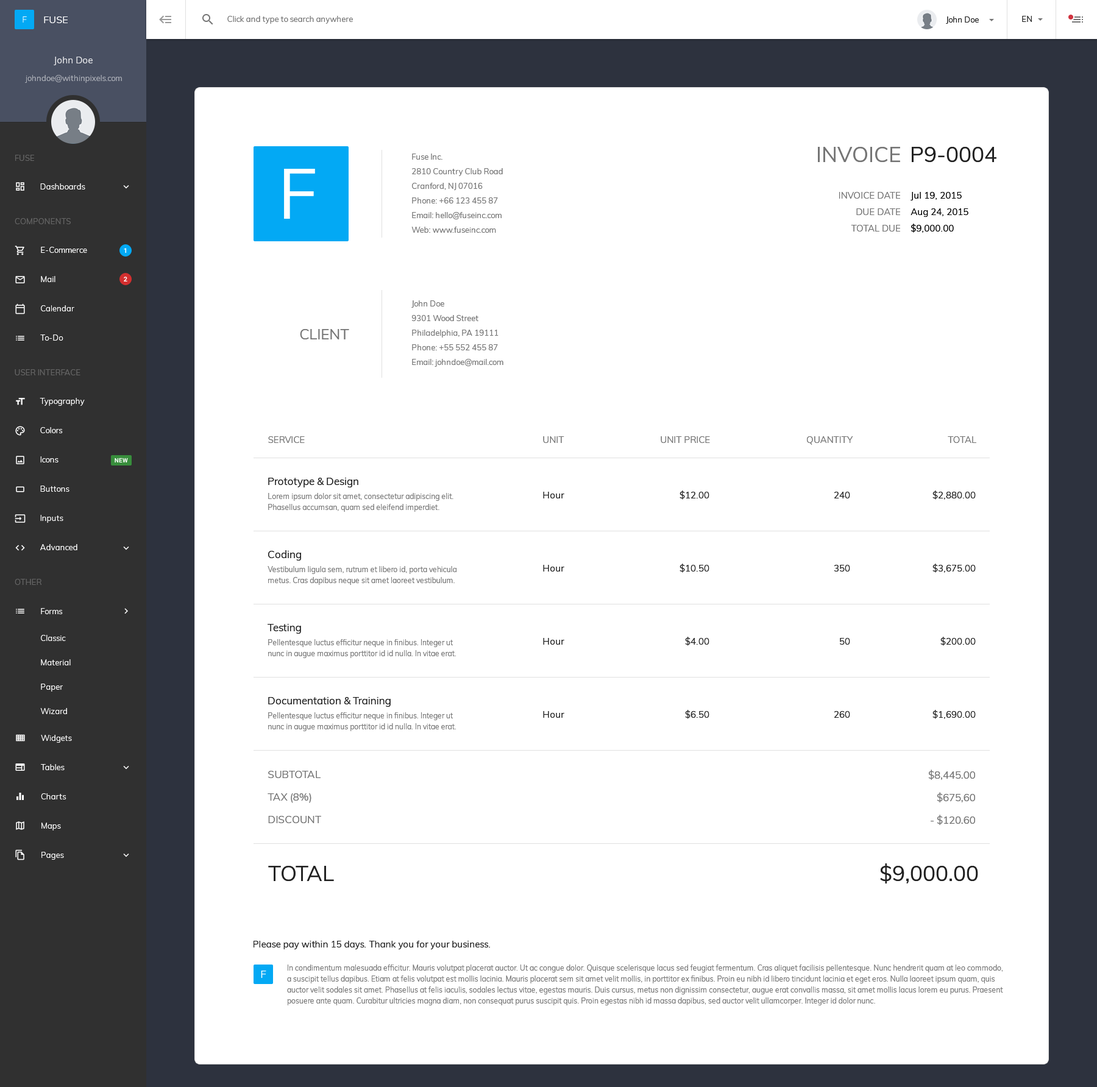
<style>
.page{position:relative;width:1097px;height:1087px;background:#ffffff}
.page>*{position:absolute;margin:0}
.t1{font:21.3px "Muli-Regular";color:#757575}
.t2{font:21.3px "Muli-Regular";color:#212121}
.t3{font:7.9px/14.6px "Muli-Regular";color:#757575}
.t4{font:70.1px "Muli-Regular";color:#ffffff}
.t5{font:9.1px "Muli-Regular";color:#757575}
.t6{font:9.1px "Muli-Regular";color:#000000}
.t7{font:14.6px "Muli-Regular";color:#757575}
.t8{font:10.4px "Muli-Regular";color:#212121}
.t9{font:7.3px/11px "Muli-Regular";color:#757575}
.t10{font:9.1px "Muli-Regular";color:#212121}
.t11{font:10.4px/22.5px "Muli-Regular";color:#757575}
.t12{font:10.4px "Muli-Regular";color:#ffffff}
</style>
<div class="page">
<p class="t1" style="left:818px;top:147px;width:82px;height:15px">INVOICE</p>
<p class="t2" style="left:912px;top:147px;width:84px;height:15px">P9-0004</p>
<p class="t3" style="left:411px;top:154px;width:92px;height:79px">Fuse Inc.<br>2810 Country Club Road <br>Cranford, NJ 07016<br>Phone: +66 123 455 87<br>Email: hello@fuseinc.com<br>Web: www.fuseinc.com</p>
<p class="t4" style="left:284px;top:169px;width:31px;height:50px">F</p>
<p class="t5" style="left:839px;top:192px;width:61px;height:7px">INVOICE DATE</p>
<p class="t6" style="left:910px;top:192px;width:52px;height:9px">Jul 19, 2015</p>
<p class="t5" style="left:856px;top:208px;width:44px;height:7px">DUE DATE</p>
<p class="t6" style="left:910px;top:208px;width:58px;height:9px">Aug 24, 2015</p>
<p class="t5" style="left:851px;top:225px;width:49px;height:7px">TOTAL DUE</p>
<p class="t6" style="left:911px;top:224px;width:43px;height:9px">$9,000.00</p>
<p class="t3" style="left:411px;top:300px;width:92px;height:67px">John Doe<br>9301 Wood Street <br>Philadelphia, PA 19111<br>Phone: +55 552 455 87<br>Email: johndoe@mail.com</p>
<p class="t7" style="left:300px;top:329px;width:49px;height:10px">CLIENT</p>
<p class="t5" style="left:268px;top:436px;width:37px;height:7px">SERVICE</p>
<p class="t5" style="left:543px;top:436px;width:21px;height:7px">UNIT</p>
<p class="t5" style="left:661px;top:436px;width:49px;height:7px">UNIT PRICE</p>
<p class="t5" style="left:807px;top:436px;width:46px;height:9px">QUANTITY</p>
<p class="t5" style="left:948px;top:436px;width:28px;height:7px">TOTAL</p>
<p class="t8" style="left:268px;top:478px;width:90px;height:9px">Prototype &amp; Design</p>
<p class="t9" style="left:268px;top:493px;width:185px;height:19px">Lorem ipsum dolor sit amet, consectetur adipiscing elit.<br>Phasellus accumsan, quam sed eleifend imperdiet.</p>
<p class="t10" style="left:543px;top:492px;width:21px;height:6px">Hour</p>
<p class="t10" style="left:679px;top:491px;width:30px;height:9px">$12.00</p>
<p class="t10" style="left:834px;top:492px;width:16px;height:6px">240</p>
<p class="t10" style="left:932px;top:491px;width:44px;height:9px">$2,880.00</p>
<p class="t8" style="left:268px;top:550px;width:33px;height:11px">Coding</p>
<p class="t9" style="left:268px;top:566px;width:188px;height:19px">Vestibulum ligula sem, rutrum et libero id, porta vehicula<br>metus. Cras dapibus neque sit amet laoreet vestibulum.</p>
<p class="t10" style="left:543px;top:565px;width:21px;height:7px">Hour</p>
<p class="t10" style="left:679px;top:564px;width:30px;height:9px">$10.50</p>
<p class="t10" style="left:834px;top:565px;width:16px;height:7px">350</p>
<p class="t10" style="left:932px;top:564px;width:44px;height:9px">$3,675.00</p>
<p class="t8" style="left:268px;top:624px;width:33px;height:10px">Testing</p>
<p class="t9" style="left:268px;top:639px;width:188px;height:19px">Pellentesque luctus efficitur neque in finibus. Integer ut<br>nunc in augue maximus porttitor id id nulla. In vitae erat.</p>
<p class="t10" style="left:543px;top:638px;width:21px;height:7px">Hour</p>
<p class="t10" style="left:685px;top:637px;width:24px;height:9px">$4.00</p>
<p class="t10" style="left:840px;top:638px;width:10px;height:7px">50</p>
<p class="t10" style="left:940px;top:637px;width:36px;height:9px">$200.00</p>
<p class="t8" style="left:268px;top:697px;width:123px;height:10px">Documentation &amp; Training</p>
<p class="t9" style="left:268px;top:712px;width:188px;height:19px">Pellentesque luctus efficitur neque in finibus. Integer ut<br>nunc in augue maximus porttitor id id nulla. In vitae erat.</p>
<p class="t10" style="left:543px;top:711px;width:21px;height:7px">Hour</p>
<p class="t10" style="left:685px;top:710px;width:24px;height:9px">$6.50</p>
<p class="t10" style="left:834px;top:711px;width:16px;height:7px">260</p>
<p class="t10" style="left:932px;top:710px;width:44px;height:9px">$1,690.00</p>
<p class="t11" style="left:268px;top:771px;width:53px;height:52px">SUBTOTAL<br>TAX (8%)<br>DISCOUNT</p>
<p class="t11" style="left:928px;top:770px;width:47px;height:55px;text-align:right">$8,445.00<br>$675,60<br>- $120.60</p>
<p class="t2" style="left:268px;top:866px;width:66px;height:15px">TOTAL</p>
<p class="t2" style="left:880px;top:863px;width:98px;height:21px">$9,000.00</p>
<p class="t10" style="left:253px;top:941px;width:237px;height:9px">Please pay within 15 days. Thank you for your business.</p>
<p class="t9" style="left:287px;top:965px;width:716px;height:40px">In condimentum malesuada efficitur. Mauris volutpat placerat auctor. Ut ac congue dolor. Quisque scelerisque lacus sed feugiat fermentum. Cras aliquet facilisis pellentesque. Nunc hendrerit quam at leo commodo,<br>a suscipit tellus dapibus. Etiam at felis volutpat est mollis lacinia. Mauris placerat sem sit amet velit mollis, in porttitor ex finibus. Proin eu nibh id libero tincidunt lacinia et eget eros. Nulla laoreet ipsum quam, quis<br>auctor velit sodales sit amet. Phasellus at felis iaculis, sodales lectus vitae, egestas mauris. Duis cursus, metus non dignissim consectetur, augue erat convallis massa, sit amet mollis lacus lorem eu purus. Praesent<br>posuere ante quam. Curabitur ultricies magna diam, non consequat purus suscipit quis. Proin egestas nibh id massa dapibus, sed auctor velit ullamcorper. Integer id dolor nunc.</p>
<p class="t12" style="left:261px;top:971px;width:5px;height:7px">F</p>
</div>
